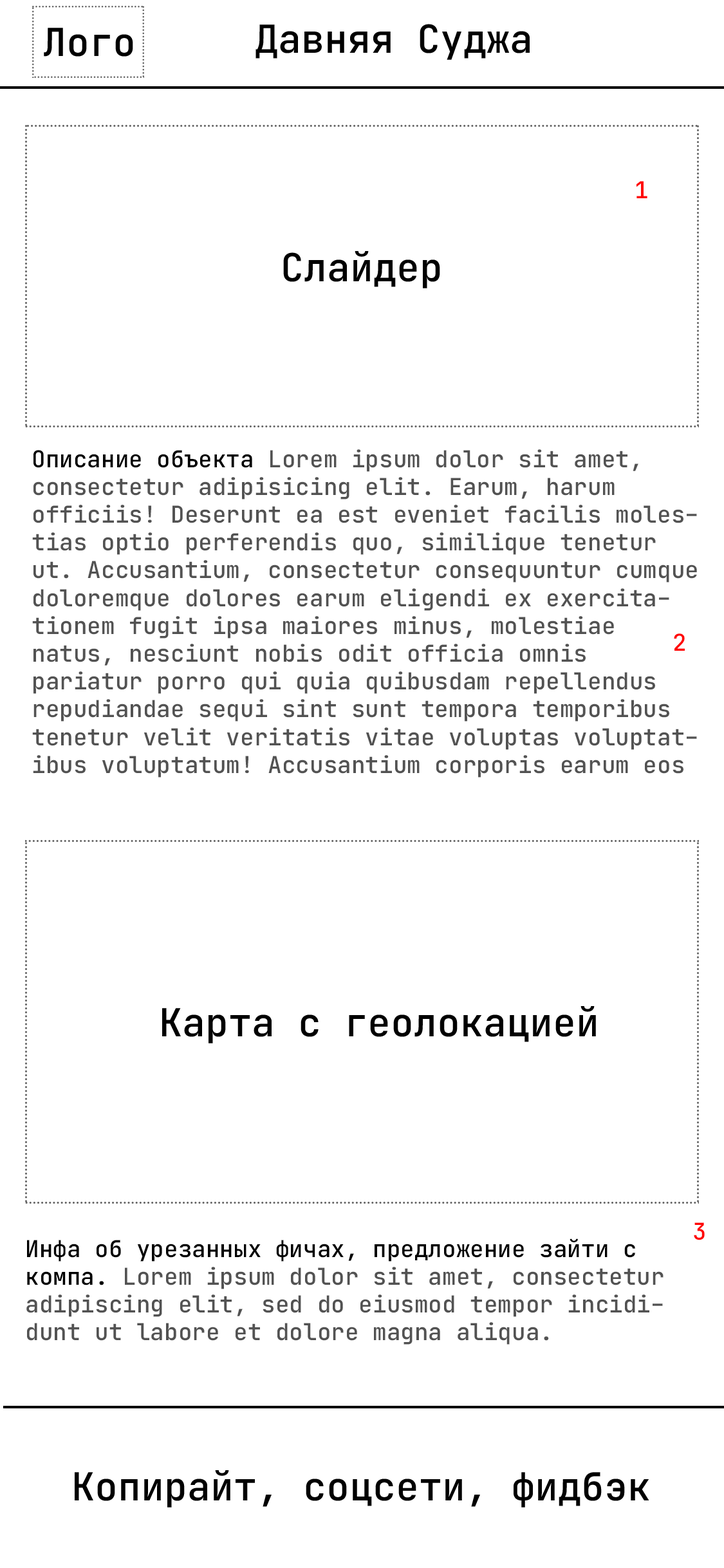
<style>
.page{position:relative;width:724px;height:1568px;background:#ffffff}
.page>*{position:absolute;margin:0}
.t1{font:23.2px "JetBrainsMono-Medium";color:#ff0404}
.t2{font:23.2px "JetBrainsMono-Medium";color:#525252}
.t3{font:23.2px "JetBrainsMono-Medium";color:#000000}
</style>
<div class="page">
<p class="t1" style="left:637px;top:181px;width:11px;height:17px">1</p>
<p class="t2" style="left:32px;top:449px;width:665px;height:329px"><span class="t3">Описание объекта </span>Lorem ipsum dolor sit amet, consectetur adipisicing elit. Earum, harum officiis! Deserunt ea est eveniet facilis molestias optio perferendis quo, similique tenetur ut. Accusantium, consectetur consequuntur cumque doloremque dolores earum eligendi ex exercitationem fugit ipsa maiores minus, molestiae natus, nesciunt nobis odit officia omnis pariatur porro qui quia quibusdam repellendus repudiandae sequi sint sunt tempora temporibus tenetur velit veritatis vitae voluptas voluptatibus voluptatum! Accusantium corporis earum eos <span class="t3">eum labore maiores nobis similique unde. Accusamus corporis, cupiditate harum id itaque non nostrum officiis porro praesentium, quas recusandae sequi veniam vero! Accusantium dolorem ducimus expedita explicabo labore laboriosam, quisquam sunt vero voluptates.</span></p>
<p class="t1" style="left:674px;top:633px;width:11px;height:18px">2</p>
<p class="t1" style="left:694px;top:1222px;width:11px;height:18px">3</p>
<p class="t2" style="left:26px;top:1238px;width:638px;height:107px"><span class="t3">Инфа об урезанных фичах, предложение зайти с компа. </span>Lorem ipsum dolor sit amet, consectetur adipiscing elit, sed do eiusmod tempor incididunt ut labore et dolore magna aliqua.</p>
</div>
